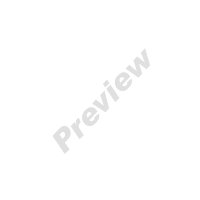
<style>
.page{position:relative;width:200px;height:200px;background:#ffffff}
.page>*{position:absolute;margin:0}
.t1{font:30px "Arial-BlackItalic";color:#e0e0e0}
</style>
<div class="page">
<p class="t1" style="left:52px;top:48px;width:99px;height:106px;rotate:-46deg">Preview</p>
</div>
